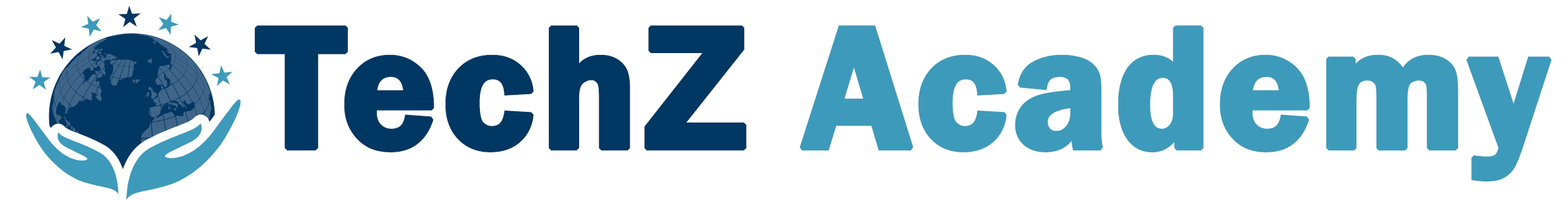
<style>
.page{position:relative;width:1568px;height:201px;background:#ffffff}
.page>*{position:absolute;margin:0}
.t1{font:180.1px "FranklinGothic-Demi";color:#3e9aba;font-weight:bold}
.t2{font:180.1px "FranklinGothic-Demi";color:#003763;font-weight:bold}
</style>
<div class="page">
<p class="t1" style="left:255px;top:25px;width:1297px;height:157px"><span class="t2">TechZ </span>Academy</p>
</div>
